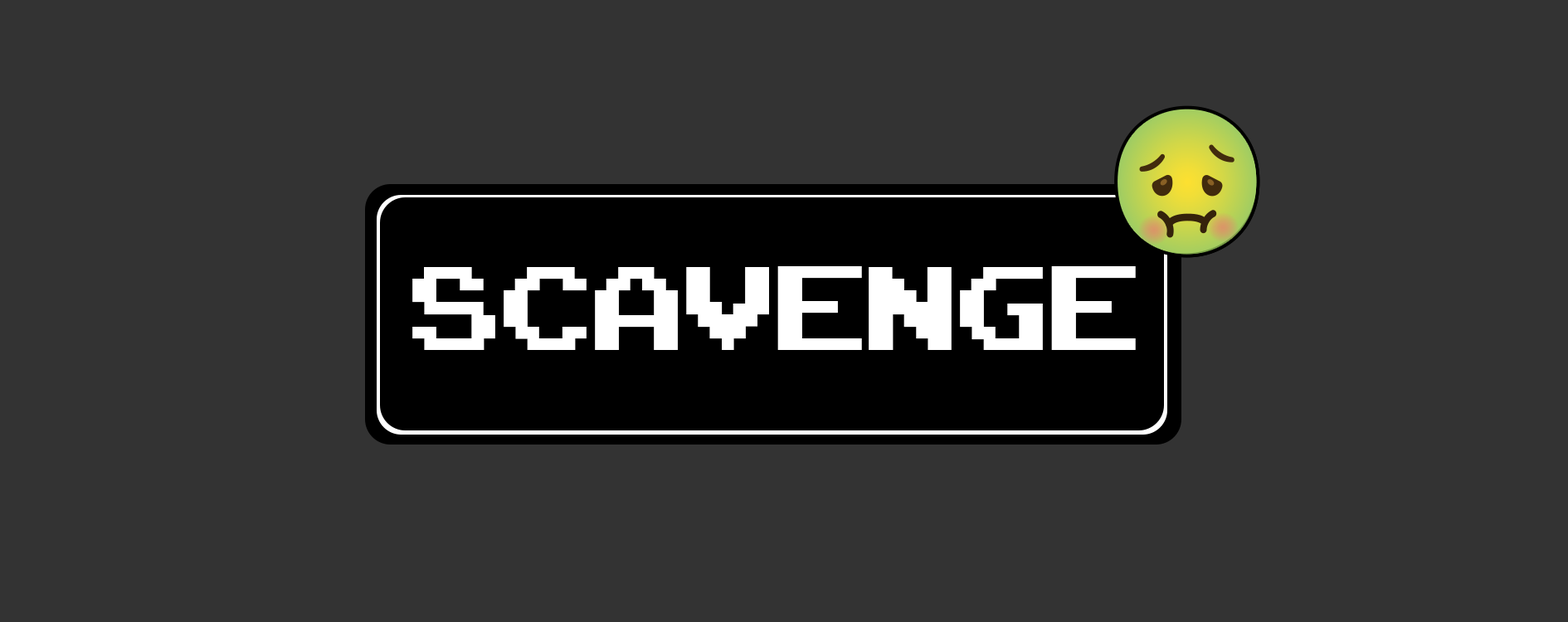
<style>
.page{position:relative;width:1568px;height:622px;background:#333333}
.page>*{position:absolute;margin:0}
.t1{font:165.9px "ArcadeClassic";color:#ffffff}
</style>
<div class="page">
<p class="t1" style="left:412px;top:266px;width:724px;height:84px">SCAVENGE</p>
</div>
